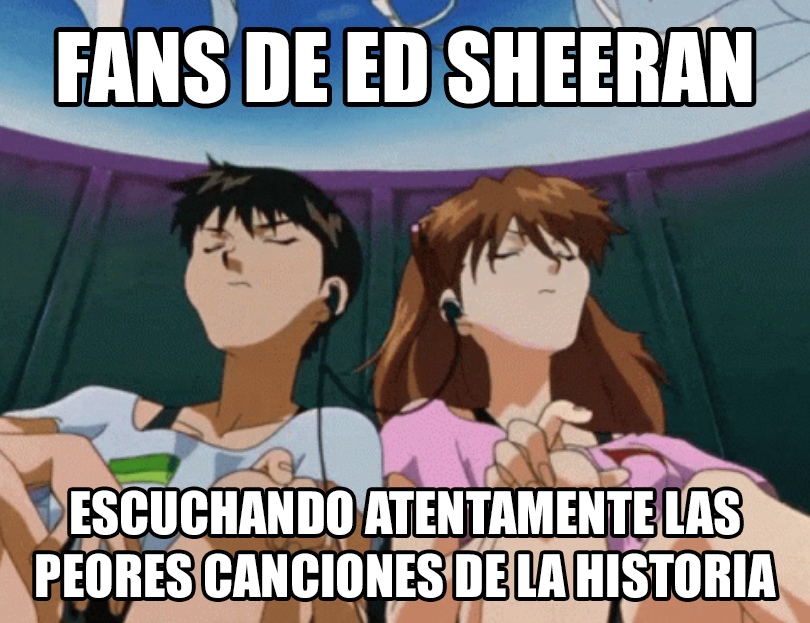
<style>
.page{position:relative;width:810px;height:623px}
.page>*{position:absolute;margin:0}
.t1{font:88.5px "Impact";color:#ffffff}
.t2{font:54.1px "Impact";color:#ffffff}
</style>
<div class="page">
<p class="t1" style="left:58px;top:30px;width:694px;height:74px">FANS DE ED SHEERAN</p>
<p class="t2" style="left:36px;top:490px;width:740px;height:108px;text-align:center">ESCUCHANDO ATENTAMENTE LAS<br>PEORES CANCIONES DE LA HISTORIA</p>
</div>
